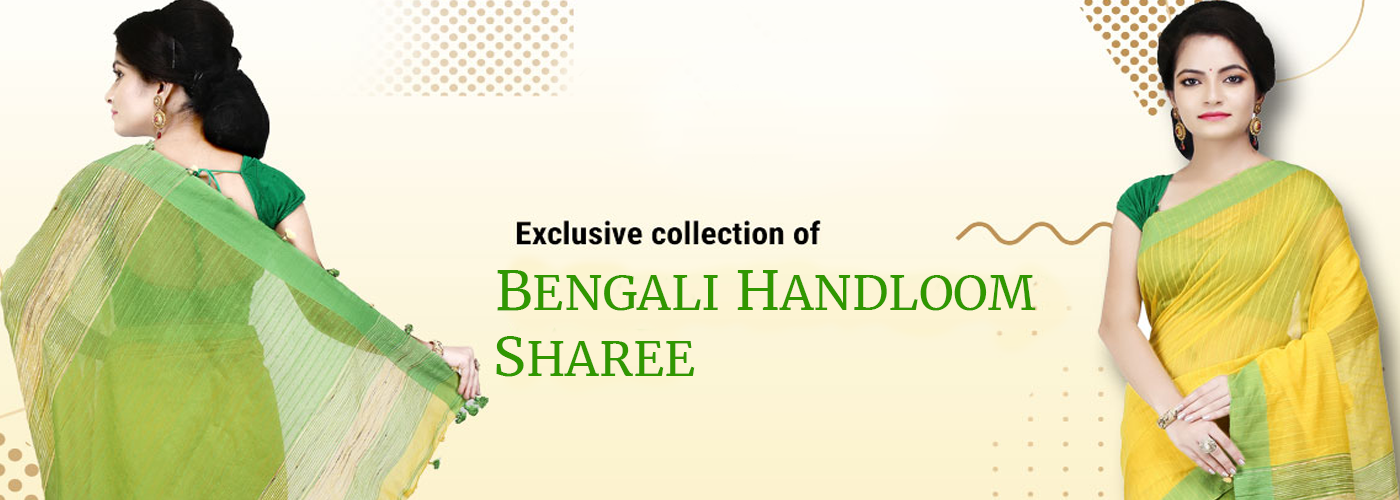
<style>
.page{position:relative;width:1400px;height:500px}
.page>*{position:absolute;margin:0}
.t1{font:48px "Merriweather-Regular";color:#309700}
.t2{font:55px "Merriweather-Regular";color:#309700}
</style>
<div class="page">
<p class="t1" style="left:496px;top:270px;width:540px;height:107px;text-align:right"><span class="t2">B</span>ENGALI <span class="t2">H</span>ANDLOOM<br><span class="t2">S</span>HAREE</p>
</div>
